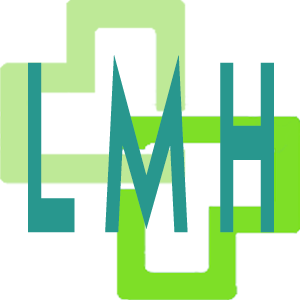
<style>
.page{position:relative;width:300px;height:300px;background:#ffffff}
.page>*{position:absolute;margin:0}
.t1{font:239px "MayekaBoldDemo";color:#28978e;scale:0.38 1}
</style>
<div class="page">
<p class="t1" style="left:28px;top:55px;width:246px;height:178px">L M H</p>
</div>
